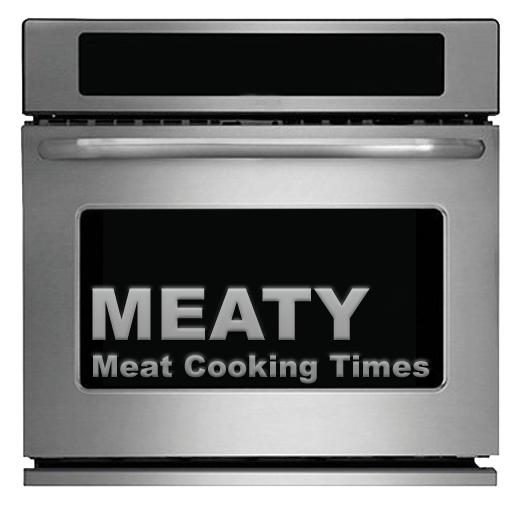
<style>
.page{position:relative;width:512px;height:512px;background:#070908}
.page>*{position:absolute;margin:0}
.t1{font:72px "Arial-Black";letter-spacing:0.01em;color:#a2a2a2}
.t2{font:30px "Arial-Black";letter-spacing:0.01em;color:#888989}
</style>
<div class="page">
<p class="t1" style="left:92px;top:288px;width:278px;height:52px">MEATY</p>
<p class="t2" style="left:93px;top:355px;width:337px;height:29px">Meat Cooking Times</p>
</div>
